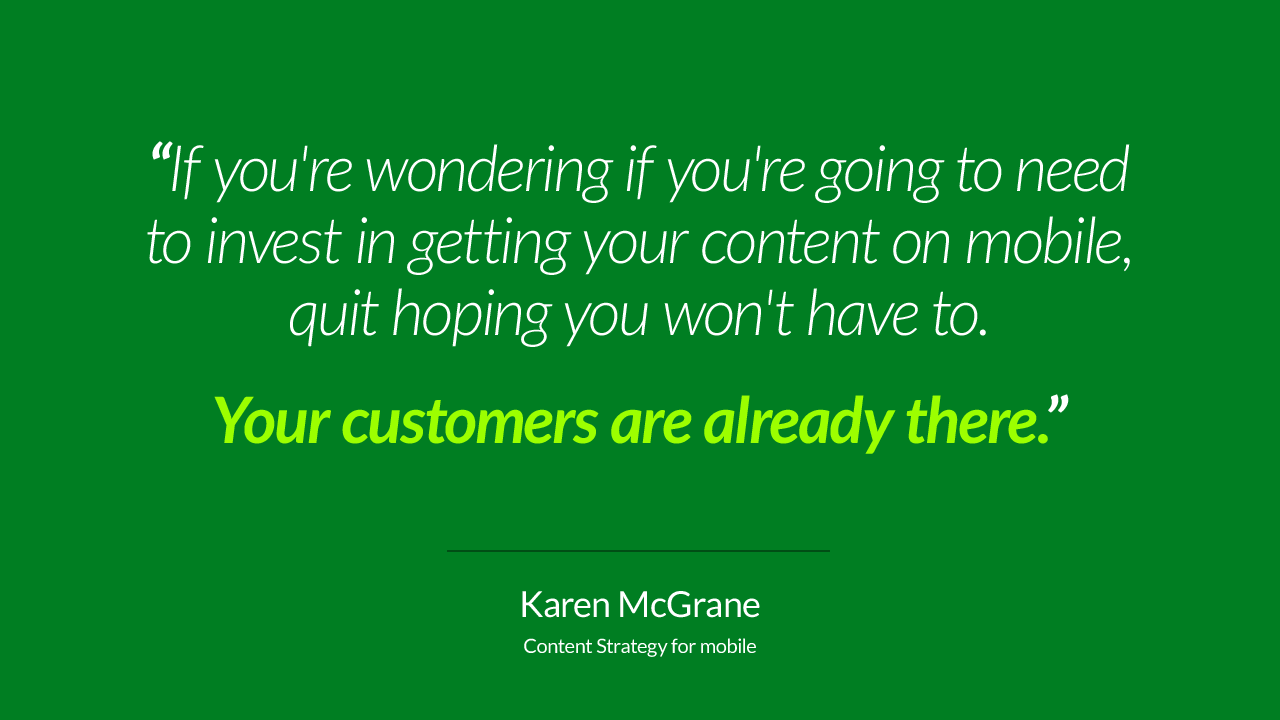
<style>
.page{position:relative;width:1280px;height:720px;background:#007e22}
.page>*{position:absolute;margin:0}
.t1{font:64px/72px "Lato-LightItalic";letter-spacing:-0.01em;color:#ffffff}
.t2{font:64px/72px "Lato-BoldItalic";letter-spacing:-0.01em;color:#ffffff}
.t3{font:64px/54px "Lato-BoldItalic";letter-spacing:-0.01em;color:#9cff00}
.t4{font:64px/54px "Lato-BoldItalic";letter-spacing:-0.01em;color:#ffffff}
.t5{font:20px/36px "Lato-Regular";letter-spacing:-0.01em;color:#fefffe}
.t6{font:36px/36px "Lato-Regular";letter-spacing:-0.01em;color:#fefffe}
</style>
<div class="page">
<p class="t1" style="left:147px;top:141px;width:983px;height:313px;text-align:center"><span class="t2">“</span>If you're wondering if you're going to need<br>to invest in getting your content on mobile,<br>quit hoping you won't have to.<br><span class="t3"><br>Your customers are already there.</span><span class="t4">”</span></p>
<p class="t5" style="left:522px;top:591px;width:238px;height:66px;text-align:center"><span class="t6">Karen McGrane<br></span>Content Strategy for mobile</p>
</div>
